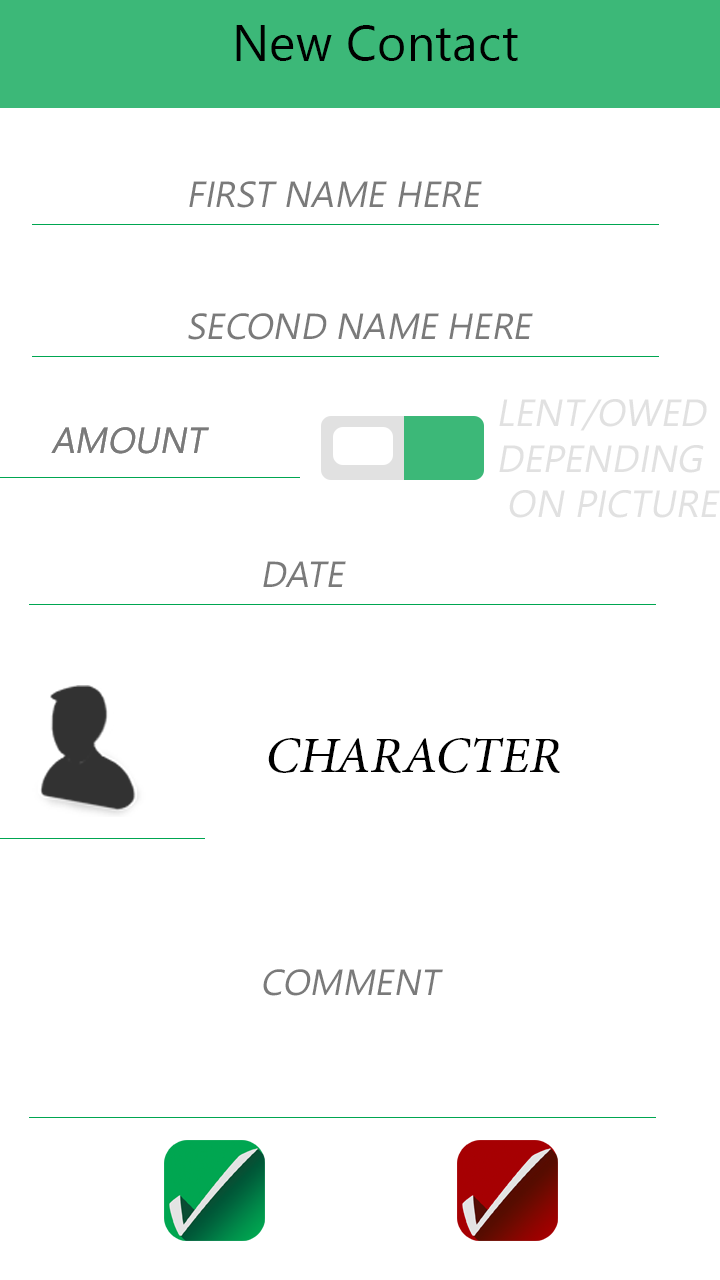
<style>
.page{position:relative;width:720px;height:1280px;background:#ffffff}
.page>*{position:absolute;margin:0}
.t1{font:50.5px "SegoeUI";color:#000000}
.t2{font:36.3px "SegoeUI";color:#7a7a7a;text-transform:uppercase;font-style:italic}
.t3{font:38.1px "SegoeUI";color:#e1e1e1;text-transform:uppercase;font-style:italic}
.t4{font:50.5px "MinionPro-Regular";color:#000000;text-transform:uppercase;font-style:italic}
</style>
<div class="page">
<p class="t1" style="left:236px;top:25px;width:282px;height:36px">New Contact</p>
<p class="t2" style="left:189px;top:181px;width:293px;height:27px">First Name HERE</p>
<p class="t2" style="left:188px;top:313px;width:345px;height:27px">Second Name here</p>
<p class="t3" style="left:499px;top:399px;width:221px;height:119px">Lent/Owed<br>depending<br> on picture</p>
<p class="t2" style="left:51px;top:427px;width:158px;height:27px">Amount</p>
<p class="t2" style="left:51px;top:427px;width:158px;height:27px">Amount</p>
<p class="t2" style="left:263px;top:561px;width:83px;height:26px">Date</p>
<p class="t4" style="left:268px;top:737px;width:292px;height:36px">Character</p>
<p class="t2" style="left:263px;top:969px;width:180px;height:27px">COMMENT</p>
</div>
